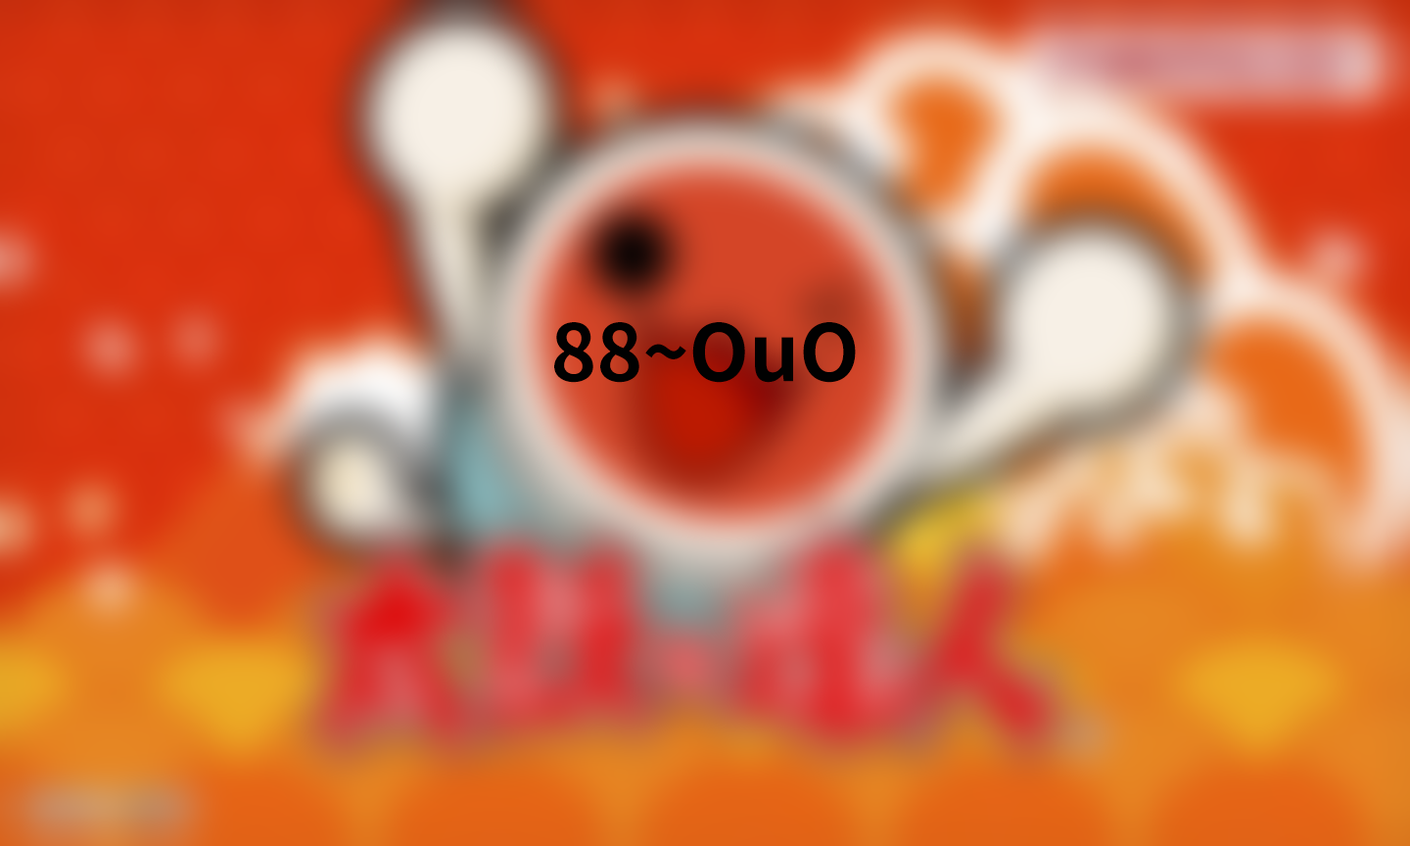
<style>
.page{position:relative;width:1410px;height:846px}
.page>*{position:absolute;margin:0}
.t1{font:78.3px "NotoSansHant-Bold";color:#010101}
</style>
<div class="page">
<p class="t1" style="left:554px;top:322px;width:302px;height:61px">88~OuO</p>
</div>
